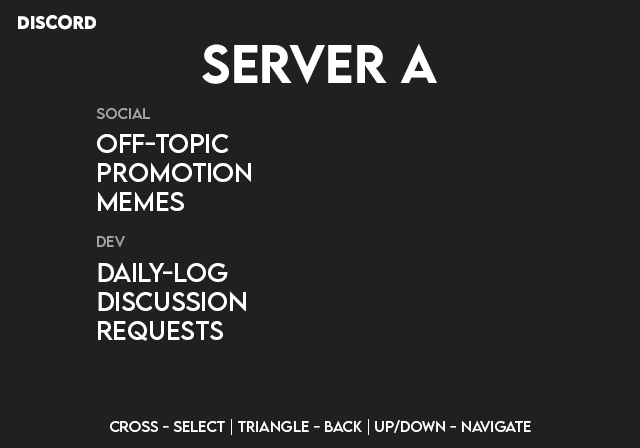
<style>
.page{position:relative;width:640px;height:448px;background:#202020}
.page>*{position:absolute;margin:0}
.t1{font:16px "LEMONMILK-Bold";color:#ffffff}
.t2{font:48px "LEMONMILK-Medium";color:#ffffff}
.t3{font:14px "LEMONMILK-Regular";color:#a6a6a6}
.t4{font:24px "LEMONMILK-Regular";color:#ffffff}
.t5{font:14px "LEMONMILK-Regular";color:#ffffff}
</style>
<div class="page">
<p class="t1" style="left:18px;top:15px;width:78px;height:15px">DISCORD</p>
<p class="t2" style="left:202px;top:44px;width:235px;height:40px">SERVER A</p>
<p class="t3" style="left:96px;top:108px;width:54px;height:11px">SOCIAL</p>
<p class="t4" style="left:97px;top:134px;width:154px;height:77px">OFF-tOPIC<br>PROMOTION<br>MEMES</p>
<p class="t3" style="left:97px;top:236px;width:28px;height:12px">DEV</p>
<p class="t4" style="left:98px;top:262px;width:148px;height:79px">DAILY-LOG<br>DISCUSSION<br>REQUESTS</p>
<p class="t5" style="left:110px;top:419px;width:421px;height:16px">CROSS - SELECT | TRIANGLE - BACK | UP/DOWN - NAVIGATE</p>
</div>
